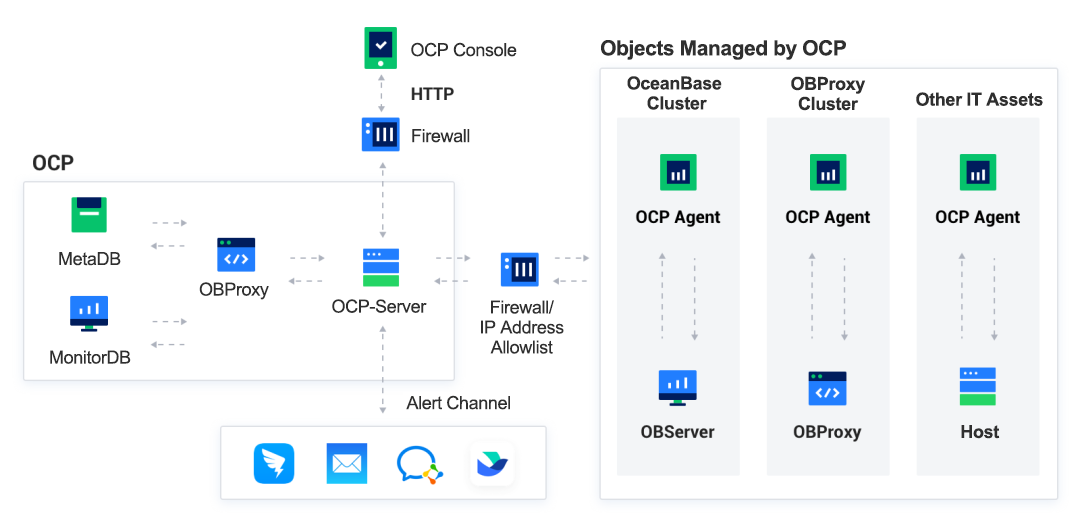
<style>
.page{position:relative;width:1080px;height:527px;background:#ffffff}
.page>*{position:absolute;margin:0}
.t1{font:21px "Arial-BoldMT";letter-spacing:-0.02em;color:#2f2f2f}
.t2{font:18px "ArialMT";letter-spacing:-0.02em;color:#2f2f2f}
.t3{font:18px/20px "Arial-BoldMT";letter-spacing:-0.02em;color:#2f2f2f}
.t4{font:18px "Arial-BoldMT";letter-spacing:-0.02em;color:#2f2f2f}
.t5{font:18px/20px "ArialMT";letter-spacing:-0.02em;color:#2f2f2f}
</style>
<div class="page">
<p class="t1" style="left:601px;top:40px;width:245px;height:20px">Objects Managed by OCP</p>
<p class="t2" style="left:411px;top:42px;width:106px;height:15px">OCP Console</p>
<p class="t3" style="left:627px;top:76px;width:95px;height:34px;text-align:center">OceanBase <br>Cluster</p>
<p class="t3" style="left:791px;top:76px;width:75px;height:35px;text-align:center">ОВРroxy<br>Cluster</p>
<p class="t4" style="left:916px;top:92px;width:127px;height:14px">Other IT Assets</p>
<p class="t2" style="left:412px;top:129px;width:58px;height:14px">Firewall</p>
<p class="t2" style="left:59px;top:252px;width:62px;height:14px">MetaDB</p>
<p class="t2" style="left:199px;top:282px;width:70px;height:18px">ОВРroxy</p>
<p class="t2" style="left:332px;top:299px;width:95px;height:14px">OCP-Server</p>
<p class="t5" style="left:481px;top:300px;width:83px;height:54px;text-align:center">Firewall/<br>IP Address Allowlist</p>
<p class="t2" style="left:50px;top:350px;width:81px;height:14px">MonitorDB</p>
<p class="t2" style="left:406px;top:395px;width:104px;height:15px">Alert Channel</p>
<p class="t4" style="left:961px;top:425px;width:39px;height:14px">Host</p>
</div>
